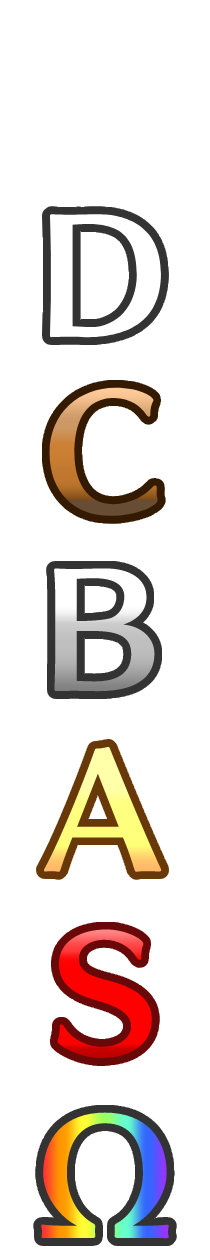
<style>
.page{position:relative;width:210px;height:1260px;background:#ffffff}
.page>*{position:absolute;margin:0}
.t1{font:150px "SkipStd-B";color:#ffffff}
.t2{font:150px "SkipStd-B"}
</style>
<div class="page">
<p class="t1" style="left:49px;top:214px;width:112px;height:124px">D</p>
<p class="t2" style="left:49px;top:387px;width:109px;height:129px">C</p>
<p class="t2" style="left:54px;top:568px;width:101px;height:124px">B</p>
<p class="t2" style="left:44px;top:746px;width:118px;height:126px">A</p>
<p class="t2" style="left:57px;top:929px;width:95px;height:129px">S</p>
</div>
